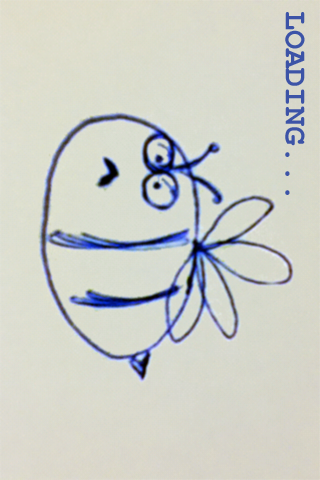
<style>
.page{position:relative;width:320px;height:480px}
.page>*{position:absolute;margin:0}
.t1{font:32px "CourierNewPS-BoldMT";color:#3c53a7}
</style>
<div class="page">
<p class="t1" style="left:285px;top:12px;width:20px;height:183px;rotate:90deg">LOADING...</p>
</div>
